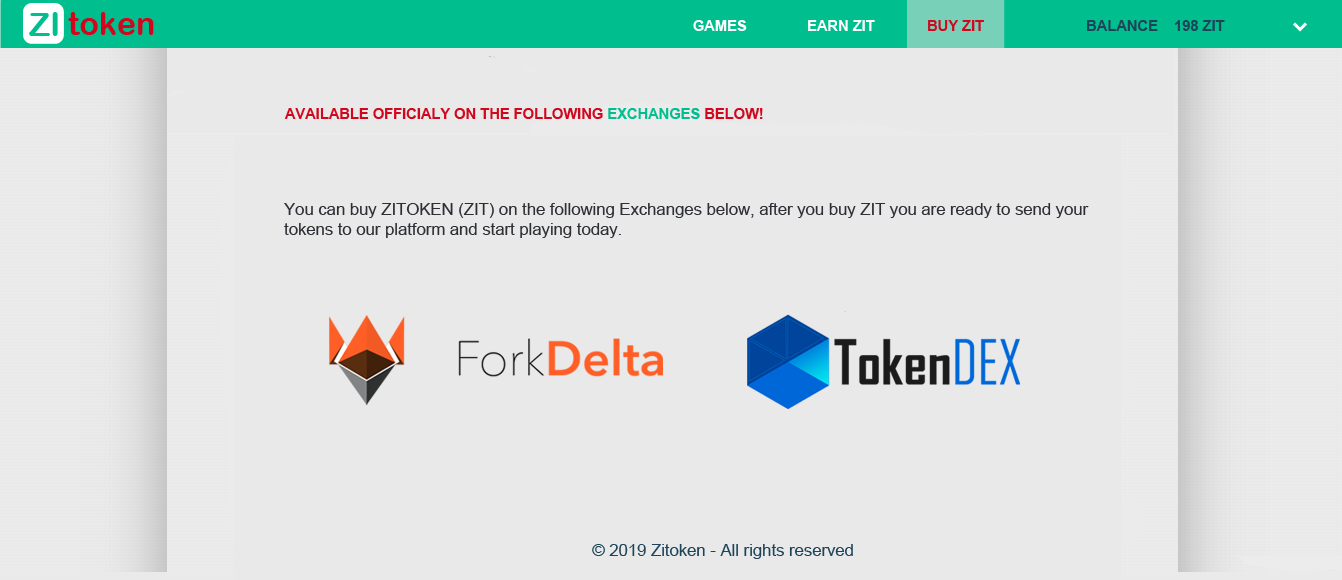
<style>
.page{position:relative;width:1342px;height:580px;background:#e9e9e9}
.page>*{position:absolute;margin:0}
.t1{font:33.3px "ArialRoundedMTBold";color:#00be8e}
.t2{font:32px "ArialRoundedMTBold";color:#d1071e}
.t3{font:14.7px "Arial-BoldMT";color:#ffffff}
.t4{font:14.7px "Arial-BoldMT";color:#d1071e}
.t5{font:14.7px "Arial-BoldMT";color:#1d4459}
.t6{font:14.7px "Arial-BoldMT";color:#00be8e}
.t7{font:16.7px "ArialMT";color:#2d2f35}
.t8{font:16.7px "ArialMT";color:#1d4459}
</style>
<div class="page">
<p class="t1" style="left:29px;top:12px;width:29px;height:24px">ZI</p>
<p class="t2" style="left:68px;top:12px;width:86px;height:23px">token</p>
<p class="t3" style="left:693px;top:20px;width:54px;height:11px">GAMES</p>
<p class="t3" style="left:808px;top:20px;width:67px;height:11px">EARN ZIT</p>
<p class="t4" style="left:928px;top:20px;width:56px;height:11px">BUY ZIT</p>
<p class="t5" style="left:1087px;top:20px;width:138px;height:11px">BALANCE    198 ZIT</p>
<p class="t4" style="left:284px;top:108px;width:479px;height:11px">AVAILABLE OFFICIALY ON THE FOLLOWING<span class="t6"> EXCHANGES </span>BELOW!</p>
<p class="t7" style="left:284px;top:203px;width:805px;height:35px">You can buy ZITOKEN (ZIT) on the following Exchanges below, after you buy ZIT you are ready to send your tokens to our platform and start playing today.</p>
<p class="t8" style="left:592px;top:544px;width:261px;height:15px">© 2019 Zitoken - All rights reserved</p>
</div>
